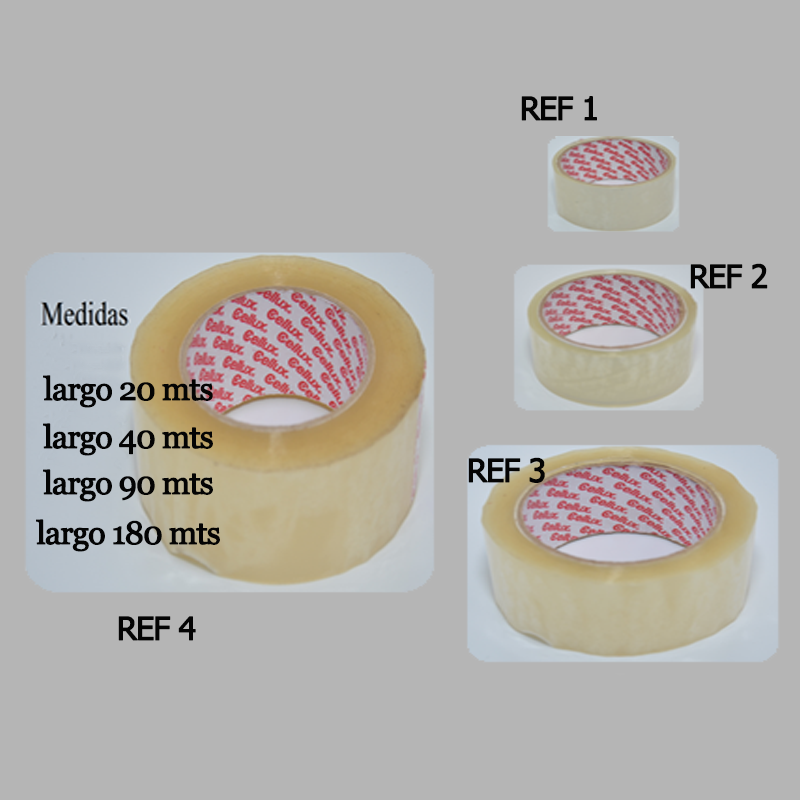
<style>
.page{position:relative;width:800px;height:800px;background:#b5b5b5}
.page>*{position:absolute;margin:0}
.t1{font:32px "Tahoma";letter-spacing:-0.05em;color:#040404;font-weight:bold}
.t2{font:32px "Georgia";letter-spacing:-0.05em;color:#040404;font-weight:bold}
</style>
<div class="page">
<p class="t1" style="left:521px;top:96px;width:76px;height:25px">REF 1</p>
<p class="t1" style="left:690px;top:263px;width:78px;height:26px">REF 2</p>
<p class="t2" style="left:43px;top:375px;width:170px;height:33px">largo 20 mts</p>
<p class="t2" style="left:43px;top:423px;width:170px;height:33px">largo 40 mts</p>
<p class="t1" style="left:468px;top:457px;width:77px;height:26px">REF 3</p>
<p class="t2" style="left:43px;top:469px;width:170px;height:33px">largo 90 mts</p>
<p class="t2" style="left:36px;top:519px;width:184px;height:33px">largo 180 mts</p>
<p class="t1" style="left:118px;top:616px;width:78px;height:25px">REF 4</p>
</div>
